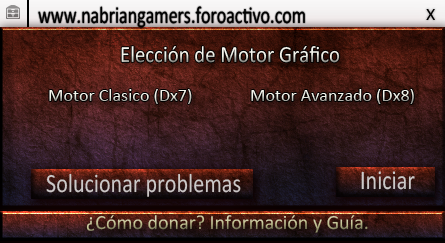
<style>
.page{position:relative;width:445px;height:243px}
.page>*{position:absolute;margin:0}
.t1{font:24px "Calibri";color:#000000;scale:0.75 1}
.t2{font:18px "Calibri";color:#000000}
.t3{font:23.4px "Calibri";scale:0.89 1}
.t4{font:18px "Calibri"}
.t5{font:26.6px "Calibri";color:#cbc8c8;scale:0.83 1}
.t6{font:27px "Calibri";color:#cbc8c8;scale:0.82 1}
.t7{font:20.2px "Calibri"}
</style>
<div class="page">
<p class="t1" style="left:38px;top:6px;width:267px;height:22px">www.nabriangamers.foroactivo.com</p>
<p class="t2" style="left:426px;top:9px;width:9px;height:11px">X</p>
<p class="t3" style="left:121px;top:46px;width:219px;height:17px">Elección de Motor Gráfico</p>
<p class="t4" style="left:49px;top:89px;width:143px;height:15px">Motor Clasico (Dx7)</p>
<p class="t4" style="left:251px;top:89px;width:163px;height:15px">Motor Avanzado (Dx8)</p>
<p class="t5" style="left:46px;top:173px;width:195px;height:24px">Solucionar problemas</p>
<p class="t6" style="left:361px;top:171px;width:54px;height:19px">Iniciar</p>
<p class="t7" style="left:86px;top:215px;width:282px;height:18px">¿Cómo donar? Información y Guía.</p>
</div>
